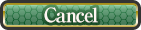
<style>
.page{position:relative;width:141px;height:30px;background:#343433}
.page>*{position:absolute;margin:0}
.t1{font:20px "RyuminPro-ExBold";letter-spacing:-0.08em;color:#fff6f2}
</style>
<div class="page">
<p class="t1" style="left:44px;top:7px;width:54px;height:16px">Cancel</p>
</div>
